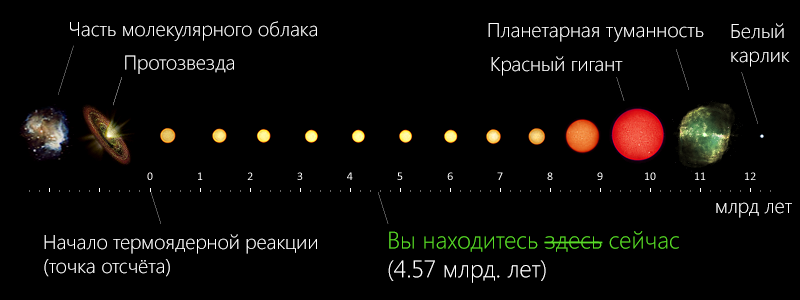
<style>
.page{position:relative;width:800px;height:300px;background:#000000}
.page>*{position:absolute;margin:0}
.t1{font:20px "SegoeUI-Light";color:#ffffff}
.t2{font:24px "SegoeUI-Light";color:#5ada29}
.t3{font:24px "SegoeUI-Light";color:#ffffff}
</style>
<div class="page">
<p class="t1" style="left:70px;top:21px;width:247px;height:20px">Часть молекулярного облака</p>
<p class="t1" style="left:488px;top:23px;width:216px;height:19px">Планетарная туманность</p>
<p class="t1" style="left:731px;top:23px;width:59px;height:44px;text-align:right">Белый<br>карлик</p>
<p class="t1" style="left:125px;top:55px;width:109px;height:19px">Протозвезда</p>
<p class="t1" style="left:491px;top:56px;width:132px;height:20px">Красный гигант</p>
<p class="t1" style="left:716px;top:202px;width:76px;height:16px">млрд лет</p>
<p class="t2" style="left:388px;top:231px;width:291px;height:52px;text-align:right">Вы находитесь здесь сейчас<br><span class="t3">(4.57 млрд. лет)</span></p>
<p class="t1" style="left:44px;top:234px;width:273px;height:43px;text-align:right">Начало термоядерной реакции<br>(точка отсчёта)</p>
</div>
